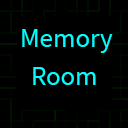
<style>
.page{position:relative;width:128px;height:128px;background:#000000}
.page>*{position:absolute;margin:0}
.t1{font:27.4px "SourceSansPro-Regular";letter-spacing:-0.01em;color:#00fffc}
</style>
<div class="page">
<p class="t1" style="left:22px;top:29px;width:91px;height:24px">Memory</p>
<p class="t1" style="left:33px;top:67px;width:63px;height:18px">Room</p>
</div>
